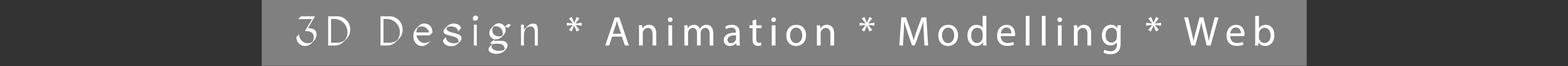
<style>
.page{position:relative;width:1568px;height:66px;background:#808080}
.page>*{position:absolute;margin:0}
.t1{font:41.7px "MyriadPro-Regular";letter-spacing:0.15em;color:#ffffff}
.t2{font:41.7px "GTFAgenturTRIAL-Regular";letter-spacing:0.15em;color:#ffffff}
</style>
<div class="page">
<p class="t1" style="left:296px;top:15px;width:978px;height:39px"><span class="t2">3D Design </span>* Animation * Modelling * Web</p>
</div>
